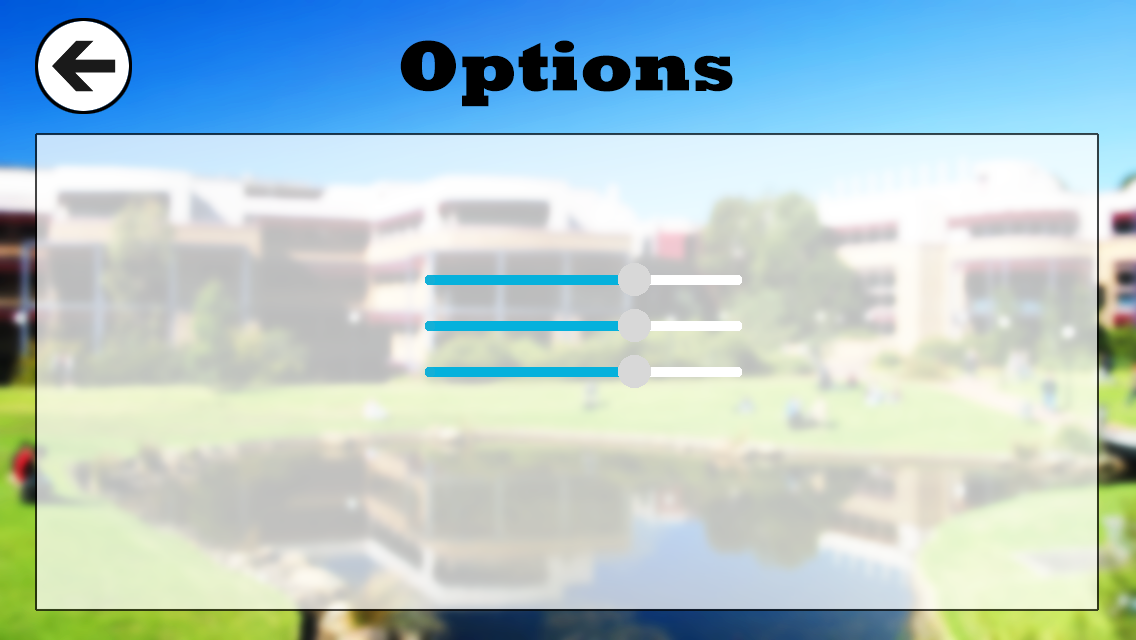
<style>
.page{position:relative;width:1136px;height:640px}
.page>*{position:absolute;margin:0}
.t1{font:72px "Rockwell-ExtraBold";color:#000000}
</style>
<div class="page">
<p class="t1" style="left:400px;top:40px;width:333px;height:67px">Options</p>
</div>
